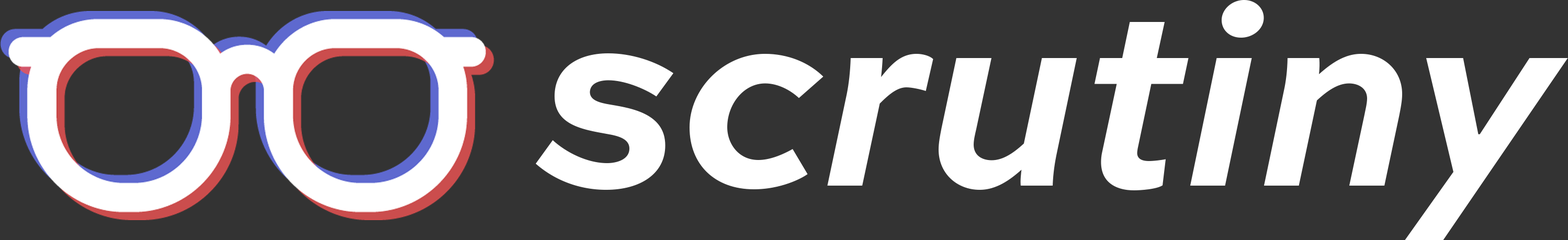
<style>
.page{position:relative;width:1568px;height:240px;background:#333333}
.page>*{position:absolute;margin:0}
.t1{font:261.6px "SweetSansPro-BoldItalic";letter-spacing:-0.01em;color:#ffffff}
</style>
<div class="page">
<p class="t1" style="left:536px;top:0px;width:1032px;height:240px">scrutiny</p>
</div>
